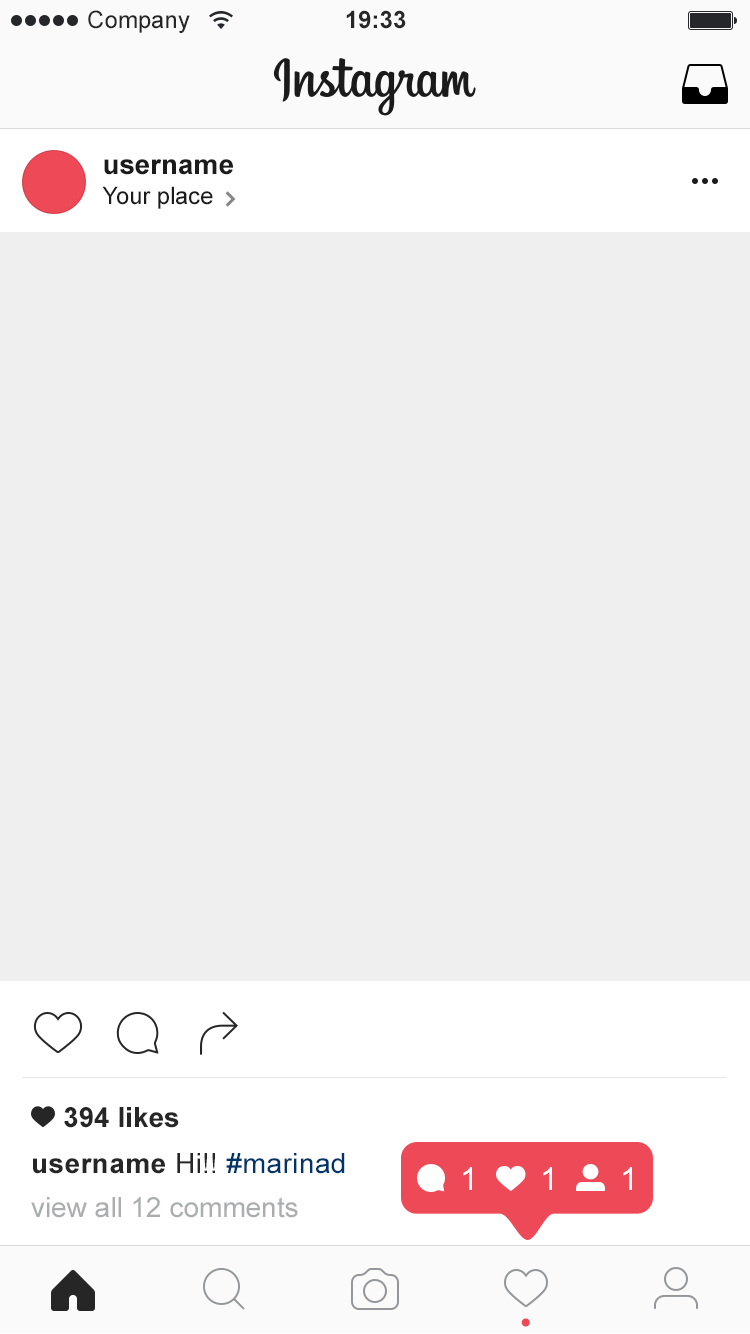
<style>
.page{position:relative;width:750px;height:1334px;background:#efefef}
.page>*{position:absolute;margin:0}
.t1{font:24px "ArialMT";color:#262626}
.t2{font:24px "Arial-BoldMT";color:#262626}
.t3{font:28px "Arial-BoldMT";color:#1b1b1b}
.t4{font:24px "ArialMT";color:#1b1b1b}
.t5{font:28px "Arial-BoldMT";color:#262626}
.t6{font:28px "Arial-BoldMT";letter-spacing:0.015em;color:#262626}
.t7{font:28px "ArialMT";letter-spacing:0.015em;color:#262626}
.t8{font:28px "ArialMT";letter-spacing:0.015em;color:#003569}
.t9{font:32px "ArialMT";color:#ffffff}
.t10{font:28px "ArialMT";color:#abadae}
</style>
<div class="page">
<p class="t1" style="left:88px;top:10px;width:102px;height:23px">Company</p>
<p class="t2" style="left:346px;top:10px;width:60px;height:19px">19:33</p>
<p class="t3" style="left:104px;top:159px;width:129px;height:16px">username</p>
<p class="t4" style="left:102px;top:186px;width:111px;height:23px">Your place</p>
<p class="t5" style="left:64px;top:1107px;width:115px;height:21px">394 likes</p>
<p class="t6" style="left:33px;top:1153px;width:312px;height:21px">username<span class="t7"> Hi!! </span><span class="t8">#marinad</span></p>
<p class="t9" style="left:463px;top:1167px;width:9px;height:23px">1</p>
<p class="t9" style="left:543px;top:1167px;width:9px;height:23px">1</p>
<p class="t9" style="left:623px;top:1167px;width:9px;height:23px">1</p>
<p class="t10" style="left:31px;top:1197px;width:267px;height:21px">view all 12 comments</p>
</div>
